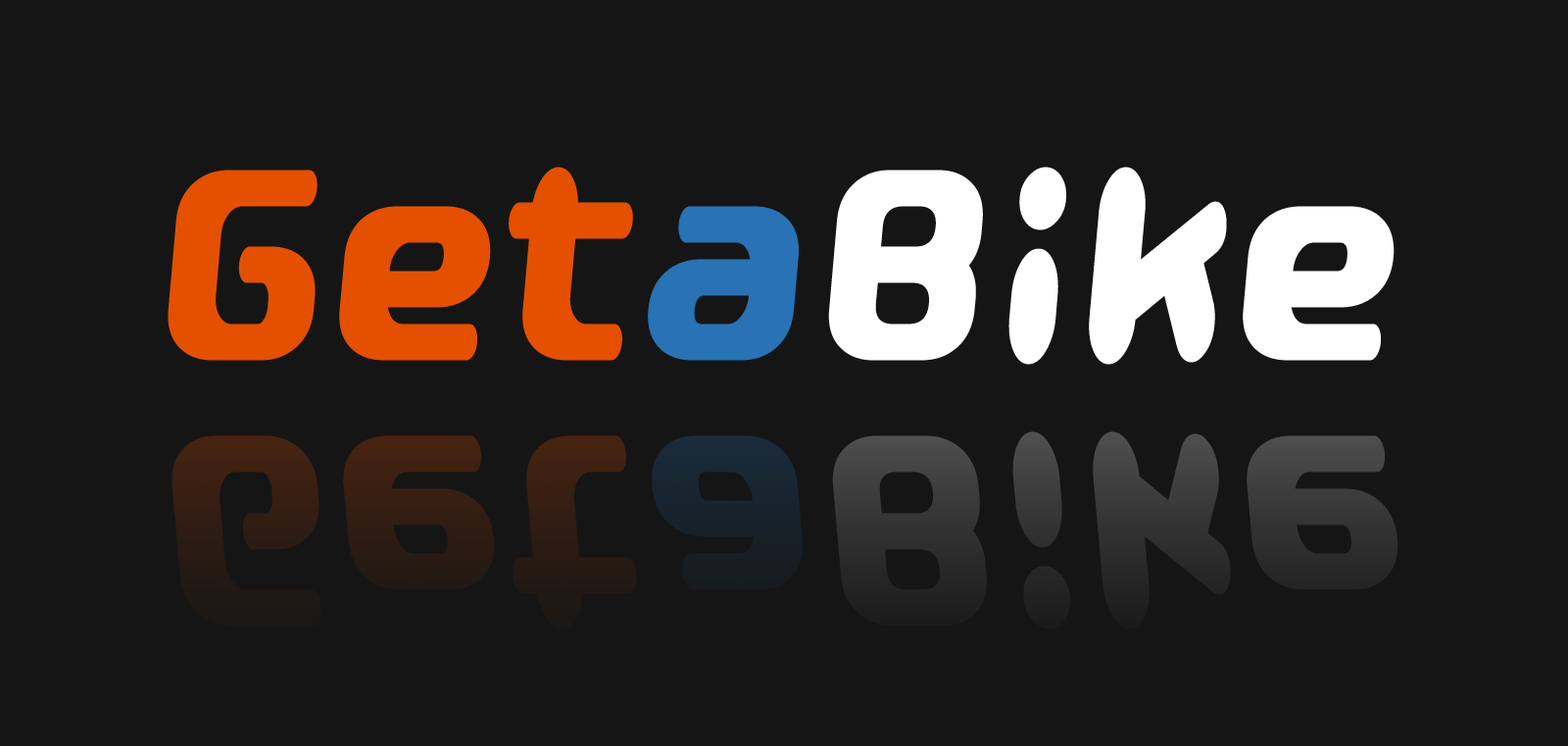
<style>
.page{position:relative;width:1568px;height:746px;background:#151515}
.page>*{position:absolute;margin:0}
.t1{font:329.2px "GauFontPopMagic";color:#ffffff;font-weight:bold;scale:0.5 1}
.t2{font:329.2px "GauFontPopMagic";color:#e45000;font-weight:bold;scale:0.5 1}
.t3{font:329.2px "GauFontPopMagic";color:#2872b5;font-weight:bold;scale:0.5 1}
</style>
<div class="page">
<p class="t1" style="left:168px;top:167px;width:1227px;height:198px"><span class="t2">Get</span><span class="t3">a</span>Bike</p>
</div>
